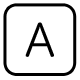
<style>
.page{position:relative;width:80px;height:80px;background:#ffffff}
.page>*{position:absolute;margin:0}
.t1{font:48px "NanumSquareRoundR";color:#000000}
</style>
<div class="page">
<p class="t1" style="left:25px;top:22px;width:29px;height:35px">A</p>
</div>
